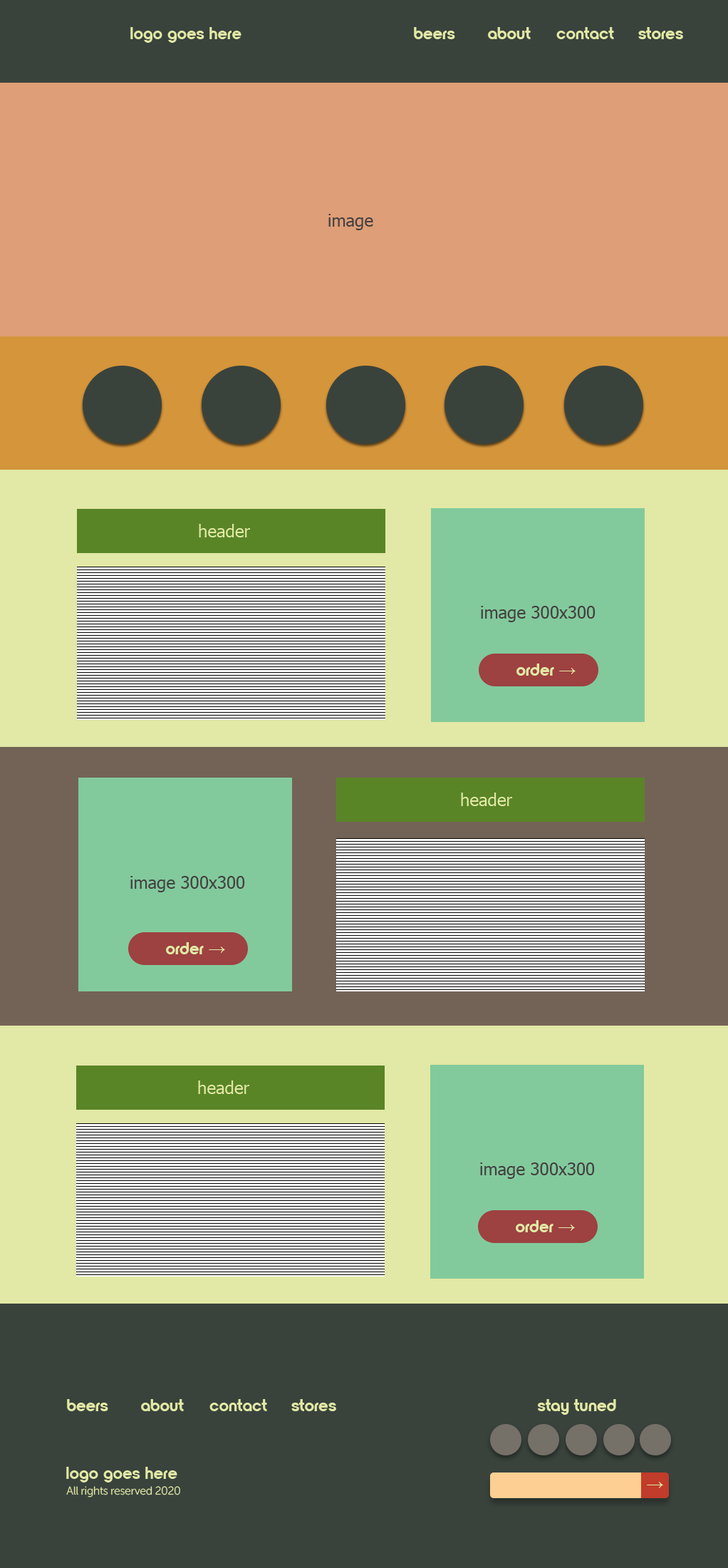
<style>
.page{position:relative;width:728px;height:1568px;background:#39433c}
.page>*{position:absolute;margin:0}
.t1{font:17.1px "NordiquePro-Bold";color:#e2e8a5}
.t2{font:17.1px "Tahoma";color:#434141}
.t3{font:17.1px "Tahoma";color:#e2e8a5}
.t4{font:17.1px "TimesNewRomanPSMT";color:#e2e8a5}
.t5{font:11.4px "MuseoSansCyrl-300";letter-spacing:-0.025em;color:#e2e8a5}
</style>
<div class="page">
<p class="t1" style="left:130px;top:27px;width:112px;height:16px">logo goes here</p>
<p class="t1" style="left:414px;top:27px;width:41px;height:12px">beers</p>
<p class="t1" style="left:488px;top:27px;width:43px;height:12px">about</p>
<p class="t1" style="left:557px;top:27px;width:57px;height:12px">contact</p>
<p class="t1" style="left:639px;top:27px;width:45px;height:12px">stores</p>
<p class="t2" style="left:329px;top:214px;width:44px;height:16px">image</p>
<p class="t3" style="left:199px;top:524px;width:51px;height:13px">header</p>
<p class="t2" style="left:481px;top:606px;width:115px;height:16px">image 300x300</p>
<p class="t1" style="left:517px;top:664px;width:59px;height:12px">order <span class="t4">→</span></p>
<p class="t3" style="left:461px;top:793px;width:51px;height:13px">header</p>
<p class="t2" style="left:130px;top:876px;width:115px;height:16px">image 300x300</p>
<p class="t1" style="left:166px;top:942px;width:59px;height:12px">order <span class="t4">→</span></p>
<p class="t3" style="left:198px;top:1080px;width:51px;height:14px">header</p>
<p class="t2" style="left:480px;top:1162px;width:115px;height:17px">image 300x300</p>
<p class="t1" style="left:516px;top:1220px;width:59px;height:12px">order <span class="t4">→</span></p>
<p class="t1" style="left:67px;top:1399px;width:41px;height:12px">beers</p>
<p class="t1" style="left:141px;top:1399px;width:43px;height:12px">about</p>
<p class="t1" style="left:210px;top:1399px;width:57px;height:12px">contact</p>
<p class="t1" style="left:292px;top:1399px;width:44px;height:12px">stores</p>
<p class="t1" style="left:538px;top:1399px;width:79px;height:16px">stay tuned</p>
<p class="t1" style="left:66px;top:1467px;width:111px;height:15px">logo goes here</p>
<p class="t4" style="left:647px;top:1482px;width:17px;height:6px"><span class="t3"> </span>→</p>
<p class="t5" style="left:66px;top:1486px;width:114px;height:11px">All rights reserved 2020</p>
</div>
